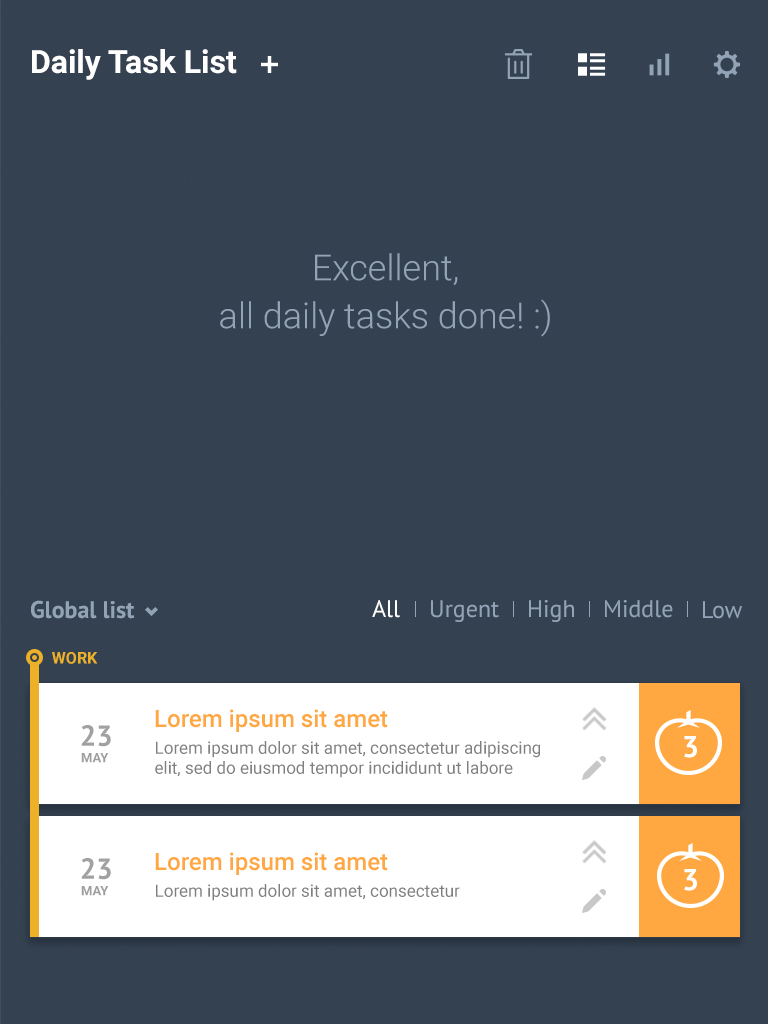
<style>
.page{position:relative;width:768px;height:1024px;background:#344150}
.page>*{position:absolute;margin:0}
.t1{font:32px "Roboto-Bold";color:#ffffff}
.t2{font:36px/48px "Roboto-Light";color:#93a3b6}
.t3{font:24px "PTSans-Bold";color:#93a3b6}
.t4{font:24px "PTSans-Regular";color:#ffffff}
.t5{font:24px "PTSans-Regular";color:#93a3b6}
.t6{font:16px "Roboto-Bold";color:#ecb129}
.t7{font:24px "Roboto-Medium";color:#ffa841}
.t8{font:29px "PTSans-Bold";color:#a1a1a1}
.t9{font:30px "PTSans-Bold";color:#ffffff}
.t10{font:17px/20px "Roboto-Regular";color:#7f7f7f}
.t11{font:13px "Roboto-Bold";color:#9e9e9e}
.t12{font:17px "Roboto-Regular";color:#7f7f7f}
</style>
<div class="page">
<p class="t1" style="left:32px;top:49px;width:205px;height:31px">Daily Task List</p>
<p class="t2" style="left:220px;top:253px;width:330px;height:84px;text-align:center">Excellent,<br>all daily tasks done! :)</p>
<p class="t3" style="left:31px;top:600px;width:104px;height:19px">Global list</p>
<p class="t4" style="left:372px;top:600px;width:28px;height:18px">All</p>
<p class="t5" style="left:431px;top:600px;width:68px;height:22px">Urgent</p>
<p class="t5" style="left:529px;top:600px;width:45px;height:22px">High</p>
<p class="t5" style="left:605px;top:600px;width:68px;height:18px">Middle</p>
<p class="t5" style="left:703px;top:601px;width:39px;height:18px">Low</p>
<p class="t6" style="left:52px;top:652px;width:46px;height:12px">WORK</p>
<p class="t7" style="left:155px;top:709px;width:233px;height:23px">Lorem ipsum sit amet</p>
<p class="t8" style="left:81px;top:725px;width:30px;height:22px">23</p>
<p class="t9" style="left:684px;top:736px;width:13px;height:22px">3</p>
<p class="t10" style="left:155px;top:741px;width:385px;height:37px">Lorem ipsum dolor sit amet, consectetur adipiscing elit, sed do eiusmod tempor incididunt ut labore</p>
<p class="t11" style="left:81px;top:753px;width:28px;height:10px">MAY</p>
<p class="t7" style="left:155px;top:852px;width:233px;height:23px">Lorem ipsum sit amet</p>
<p class="t8" style="left:81px;top:858px;width:30px;height:22px">23</p>
<p class="t9" style="left:684px;top:869px;width:13px;height:22px">3</p>
<p class="t11" style="left:81px;top:886px;width:28px;height:10px">MAY</p>
<p class="t12" style="left:156px;top:884px;width:304px;height:17px">Lorem ipsum dolor sit amet, consectetur</p>
</div>
